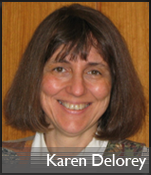
<style>
.page{position:relative;width:151px;height:175px}
.page>*{position:absolute;margin:0}
.t1{font:16.7px "GillSansMT";color:#fffefe}
</style>
<div class="page">
<p class="t1" style="left:47px;top:154px;width:100px;height:16px">Karen Delorey</p>
</div>
